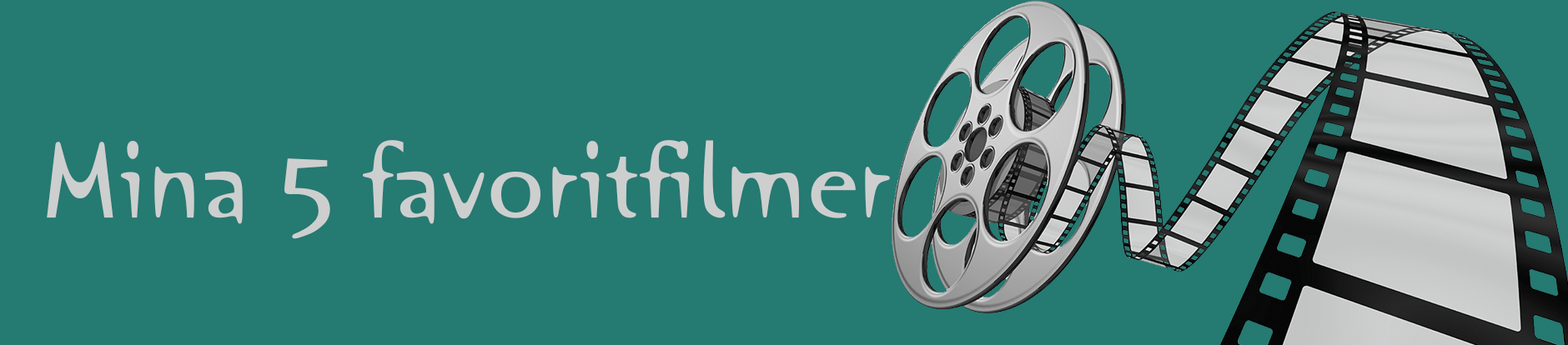
<style>
.page{position:relative;width:1568px;height:345px;background:#257a72}
.page>*{position:absolute;margin:0}
.t1{font:111.2px "OrangeLetPlain";color:#cdcfcf}
</style>
<div class="page">
<p class="t1" style="left:47px;top:140px;width:843px;height:99px">Mina 5 favoritfilmer</p>
</div>
